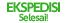
<style>
.page{position:relative;width:68px;height:23px;background:#ffffff}
.page>*{position:absolute;margin:0}
.t1{font:12px/10px "UDShinGoPro-Bold";letter-spacing:-0.08em;color:#37b027}
.t2{font:9px/9px "UDShinGoPro-Bold";letter-spacing:-0.08em;color:#37b027}
</style>
<div class="page">
<p class="t1" style="left:7px;top:2px;width:53px;height:20px;text-align:center">EKSPEDISI<br><span class="t2">Selesai!</span></p>
</div>
